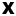
<style>
.page{position:relative;width:16px;height:16px;background:#ffffff}
.page>*{position:absolute;margin:0}
.t1{font:16px "Arial-Black";color:#010101}
</style>
<div class="page">
<p class="t1" style="left:2px;top:2px;width:13px;height:12px">X</p>
</div>
